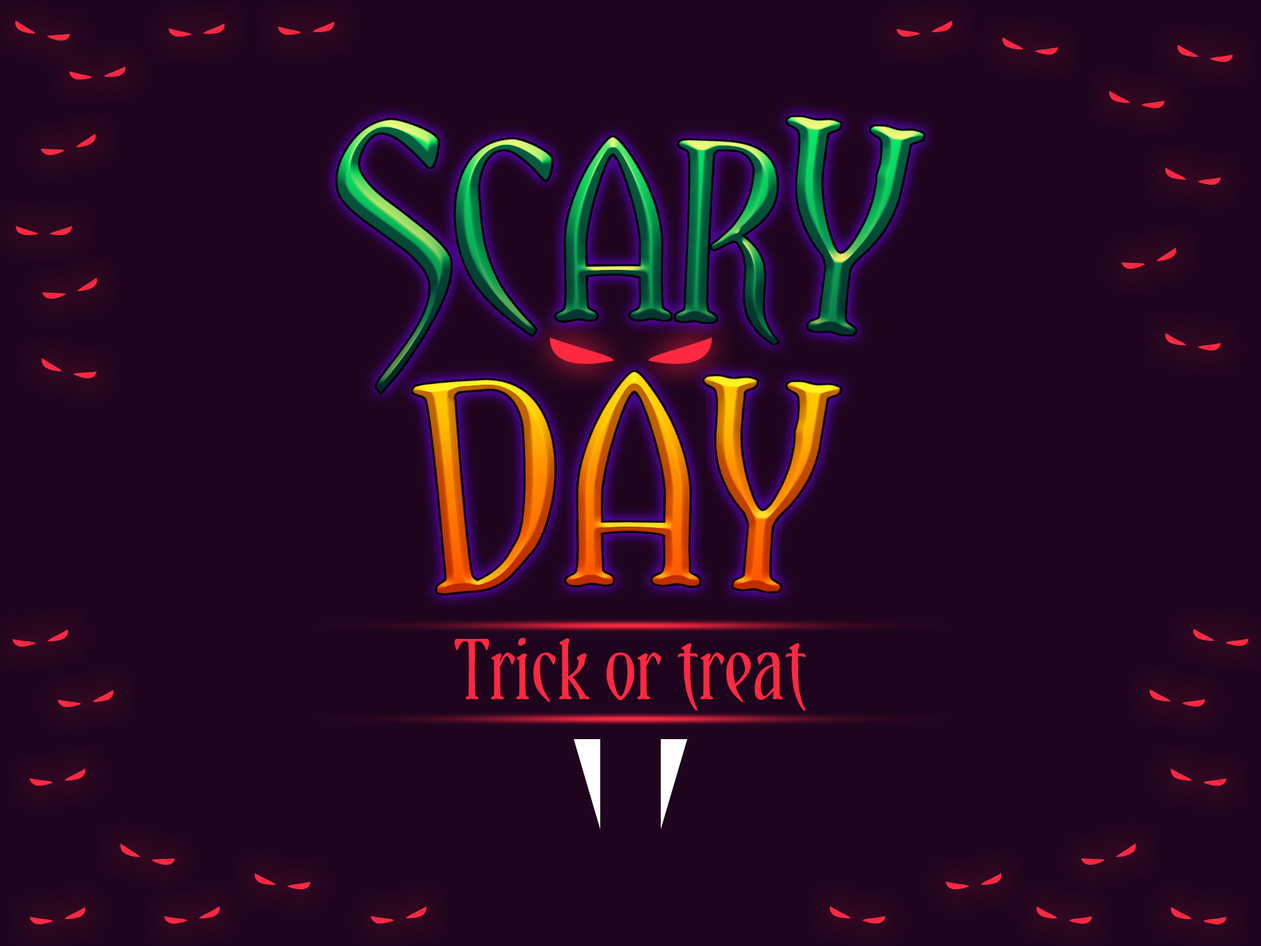
<style>
.page{position:relative;width:1261px;height:946px;background:#1e041d}
.page>*{position:absolute;margin:0}
.t1{font:63px "Yataghan";color:#ff2841}
</style>
<div class="page">
<p class="t1" style="left:455px;top:637px;width:351px;height:74px">Trick or treat</p>
</div>
